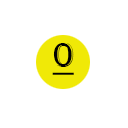
<style>
.page{position:relative;width:128px;height:128px;background:#ffffff}
.page>*{position:absolute;margin:0}
.t1{font:36px "Algerian";color:#010101;text-decoration:underline}
</style>
<div class="page">
<p class="t1" style="left:52px;top:43px;width:22px;height:32px">0</p>
</div>
